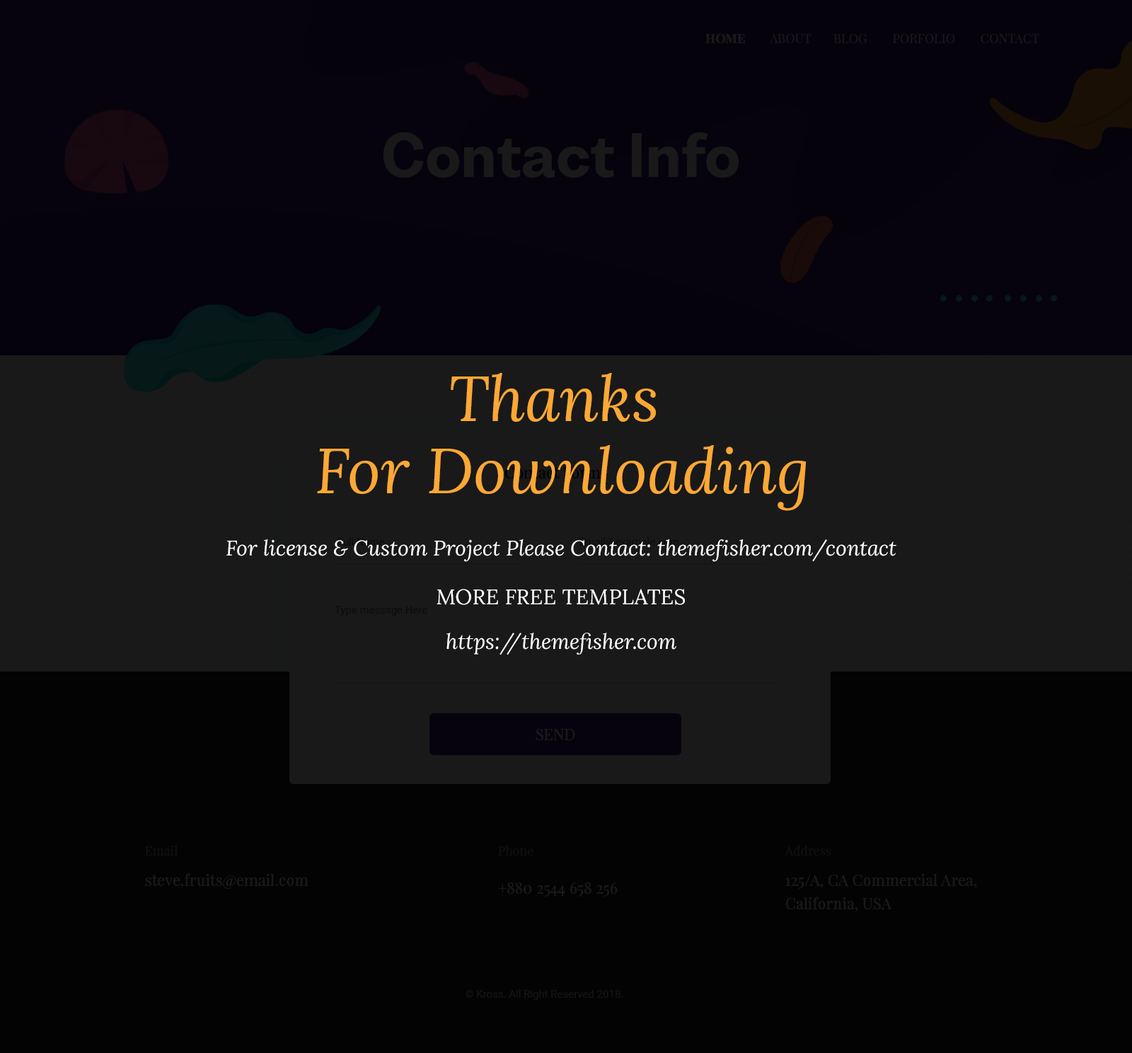
<style>
.page{position:relative;width:1132px;height:1053px;background:#030303}
.page>*{position:absolute;margin:0}
.t1{font:12.7px "PlayfairDisplay-Regular";color:#191919}
.t2{font:12.7px "PlayfairDisplay-Bold";color:#191919}
.t3{font:56.6px "BwNistaGrot-xBd";color:#191919}
.t4{font:63.7px/72.2px "Lora-Italic";color:#fba835}
.t5{font:15.6px "PlayfairDisplay-Regular";color:#000000}
.t6{font:21.2px "Lora-Italic";color:#ffffff}
.t7{font:21.2px "Lora-Regular";color:#ffffff;text-transform:uppercase}
.t8{font:10.6px "Roboto-Regular";color:#000000}
.t9{font:15.6px "PlayfairDisplay-Regular";color:#191919}
.t10{font:12.7px "PlayfairDisplay-Regular";color:#0f0f0f}
.t11{font:15.6px/23.4px "PlayfairDisplay-Regular";color:#191919}
.t12{font:10.6px "Roboto-Regular";color:#141414}
</style>
<div class="page">
<p class="t1" style="left:706px;top:34px;width:334px;height:9px"><span class="t2">HOME </span>       ABOUT       BLOG        PORFOLIO        CONTACT</p>
<p class="t3" style="left:384px;top:132px;width:355px;height:46px">Contact Info</p>
<p class="t4" style="left:317px;top:373px;width:490px;height:138px;text-align:center">Thanks <br>For Downloading</p>
<p class="t5" style="left:505px;top:467px;width:96px;height:11px">Contact Form</p>
<p class="t6" style="left:226px;top:539px;width:671px;height:23px">For license &amp; Custom Project Please Contact: themefisher.com/contact</p>
<p class="t7" style="left:437px;top:589px;width:248px;height:16px">More Free Templates</p>
<p class="t8" style="left:335px;top:606px;width:92px;height:10px;opacity:0.7">Type messsge Here</p>
<p class="t6" style="left:447px;top:633px;width:230px;height:22px">https://themefisher.com</p>
<p class="t9" style="left:536px;top:729px;width:39px;height:11px">SEND</p>
<p class="t10" style="left:145px;top:845px;width:33px;height:11px">Email</p>
<p class="t10" style="left:498px;top:845px;width:36px;height:11px">Phone</p>
<p class="t10" style="left:785px;top:845px;width:47px;height:11px">Address</p>
<p class="t9" style="left:145px;top:873px;width:164px;height:16px">steve.fruits@email.com</p>
<p class="t11" style="left:786px;top:873px;width:191px;height:39px">125/A, CA Commercial Area, <br>California, USA</p>
<p class="t9" style="left:498px;top:883px;width:120px;height:14px">+880 2544 658 256</p>
<p class="t12" style="left:466px;top:989px;width:157px;height:11px">© Kross. All Right Reserved 2018.</p>
</div>
